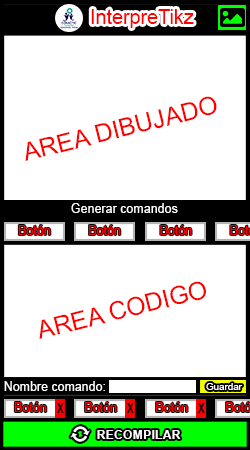
<style>
.page{position:relative;width:250px;height:450px;background:#ffffff}
.page>*{position:absolute;margin:0}
.t1{font:19.6px "ArialMT";color:#ff0000}
.t2{font:24.9px "ArialMT";color:#ff0000}
.t3{font:12.7px "ArialMT";color:#ffffff}
.t4{font:12.5px "ArialMT";color:#ff0000}
.t5{font:10.1px "ArialMT";color:#ffffff;scale:0.96 1}
.t6{font:12.7px "ArialMT";color:#ff0000}
.t7{font:13.8px "Arial-BoldMT";color:#000000;scale:0.76 1}
.t8{font:13.6px "Arial-BoldMT";color:#000000;scale:0.77 1}
.t9{font:12.5px "Arial-BoldMT";color:#ffffff}
</style>
<div class="page">
<p class="t1" style="left:91px;top:9px;width:103px;height:19px">InterpreTikz</p>
<p class="t2" style="left:25px;top:96px;width:192px;height:65px;rotate:-14deg">AREA DIBUJADO</p>
<p class="t3" style="left:71px;top:203px;width:107px;height:10px">Generar comandos</p>
<p class="t4" style="left:18px;top:225px;width:33px;height:10px">Botón</p>
<p class="t4" style="left:89px;top:225px;width:32px;height:10px">Botón</p>
<p class="t4" style="left:160px;top:225px;width:32px;height:10px">Botón</p>
<p class="t2" style="left:39px;top:281px;width:167px;height:58px;rotate:-14deg">AREA CODIGO</p>
<p class="t3" style="left:4px;top:381px;width:101px;height:10px">Nombre comando:</p>
<p class="t5" style="left:206px;top:383px;width:37px;height:7px">Guardar</p>
<p class="t6" style="left:14px;top:402px;width:33px;height:10px">Botón</p>
<p class="t7" style="left:57px;top:403px;width:7px;height:10px">X</p>
<p class="t4" style="left:85px;top:402px;width:32px;height:10px">Botón</p>
<p class="t8" style="left:127px;top:403px;width:7px;height:10px">X</p>
<p class="t4" style="left:156px;top:402px;width:32px;height:10px">Botón</p>
<p class="t8" style="left:198px;top:403px;width:7px;height:10px">X</p>
<p class="t9" style="left:97px;top:430px;width:84px;height:9px">RECOMPILAR</p>
</div>
